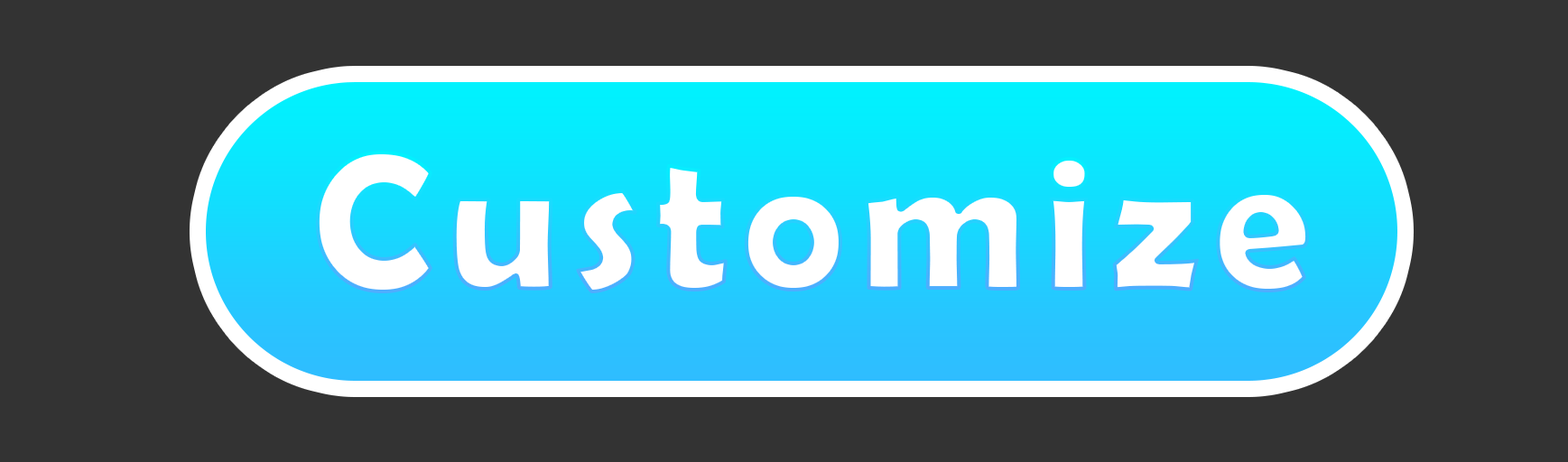
<style>
.page{position:relative;width:1568px;height:462px;background:#333333}
.page>*{position:absolute;margin:0}
.t1{font:197.6px "BerlinSansFBDemi-Bold";letter-spacing:0.06em;color:#ffffff}
</style>
<div class="page">
<p class="t1" style="left:315px;top:151px;width:995px;height:142px">Customize</p>
</div>
